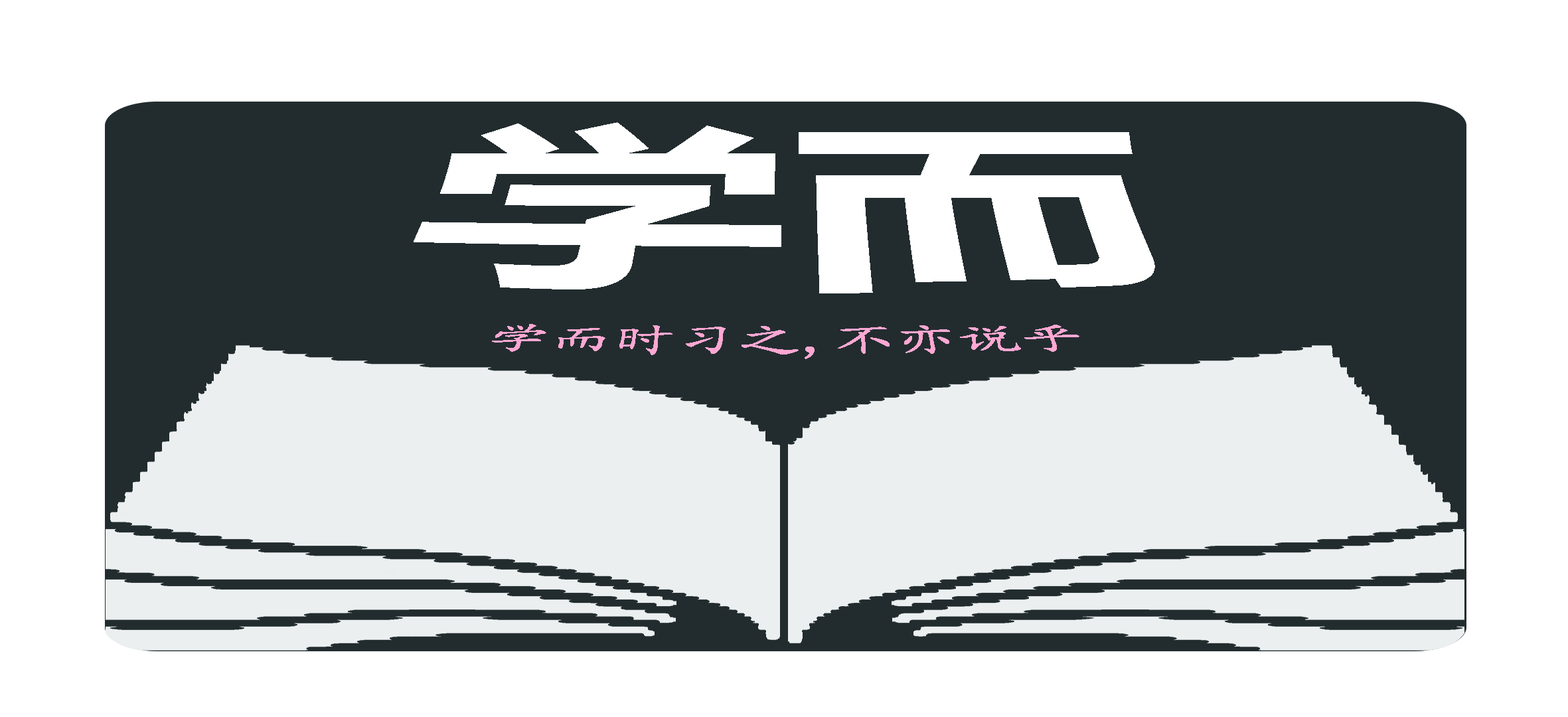
<style>
.page{position:relative;width:1568px;height:717px;background:#ffffff}
.page>*{position:absolute;margin:0}
.t1{font:166.7px "MicrosoftYaHei-Bold";color:#ffffff;scale:2.1 1}
.t2{font:28.4px "KaiTi";color:#fea7d2;scale:2.19 1}
</style>
<div class="page">
<p class="t1" style="left:414px;top:122px;width:741px;height:171px">学而</p>
<p class="t2" style="left:492px;top:324px;width:587px;height:35px">学而时习之,不亦说乎</p>
</div>
